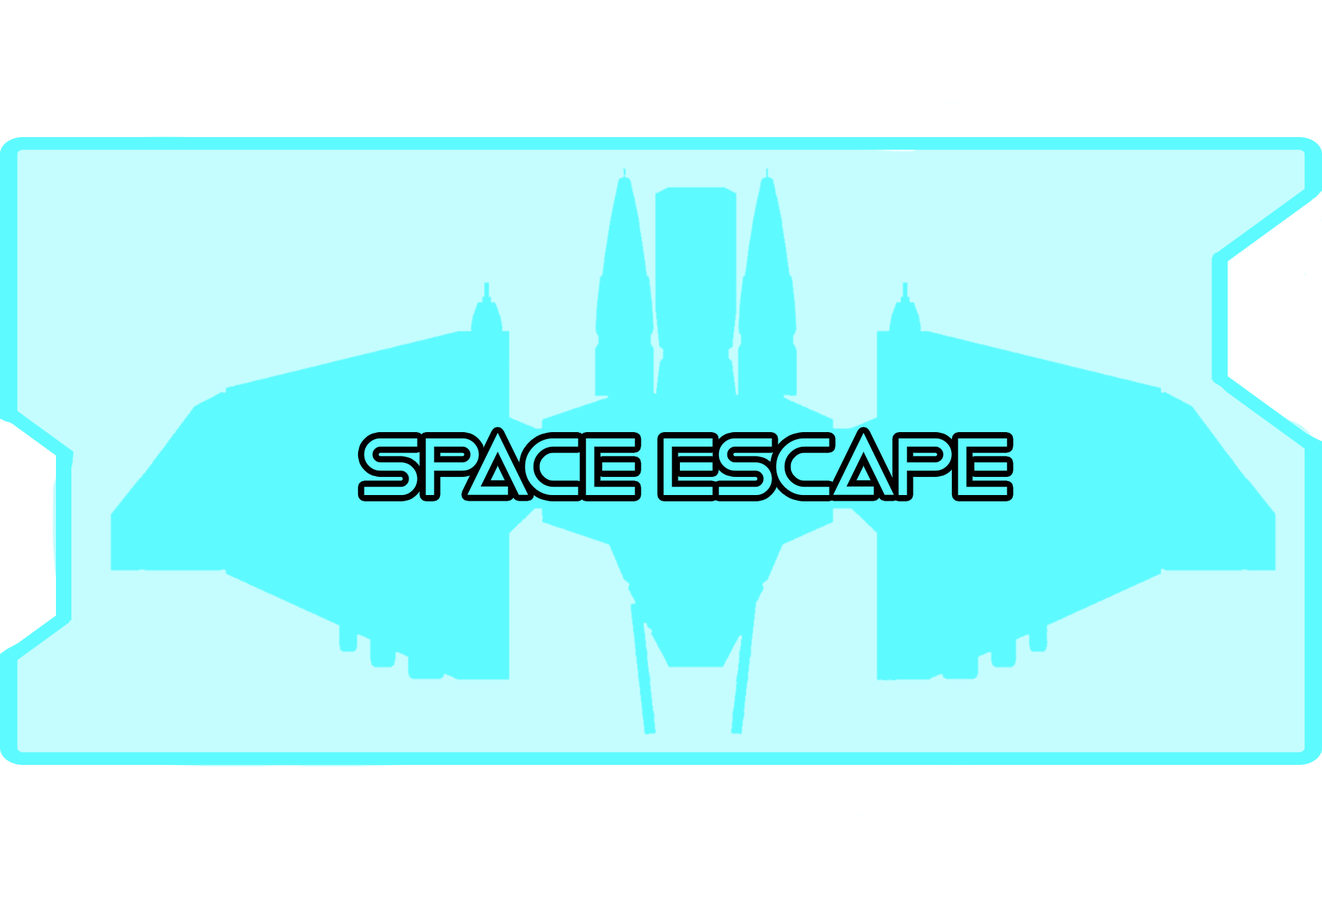
<style>
.page{position:relative;width:1322px;height:902px;background:#c5fdff}
.page>*{position:absolute;margin:0}
.t1{font:83.3px "MandatoryPlaything";color:#5dfaff}
</style>
<div class="page">
<p class="t1" style="left:364px;top:433px;width:643px;height:62px">Space escape</p>
</div>
